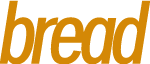
<style>
.page{position:relative;width:150px;height:64px;background:#ffffff}
.page>*{position:absolute;margin:0}
.t1{font:74.9px "SmileySans-Oblique";letter-spacing:-0.08em;color:#d48806;scale:1.12 1}
</style>
<div class="page">
<p class="t1" style="left:0px;top:0px;width:151px;height:65px">bread</p>
</div>
